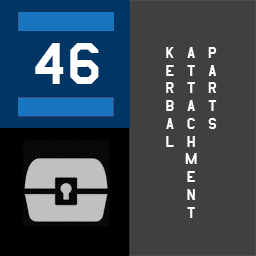
<style>
.page{position:relative;width:256px;height:256px;background:#404040}
.page>*{position:absolute;margin:0}
.t1{font:69.1px "AmarilloUSAF";color:#ffffff}
.t2{font:17.8px "AmarilloUSAF";color:#ffffff}
</style>
<div class="page">
<p class="t1" style="left:35px;top:43px;width:64px;height:41px">46</p>
<p class="t2" style="left:166px;top:47px;width:51px;height:171px">parts<br>attachment<br>kerbal</p>
</div>
